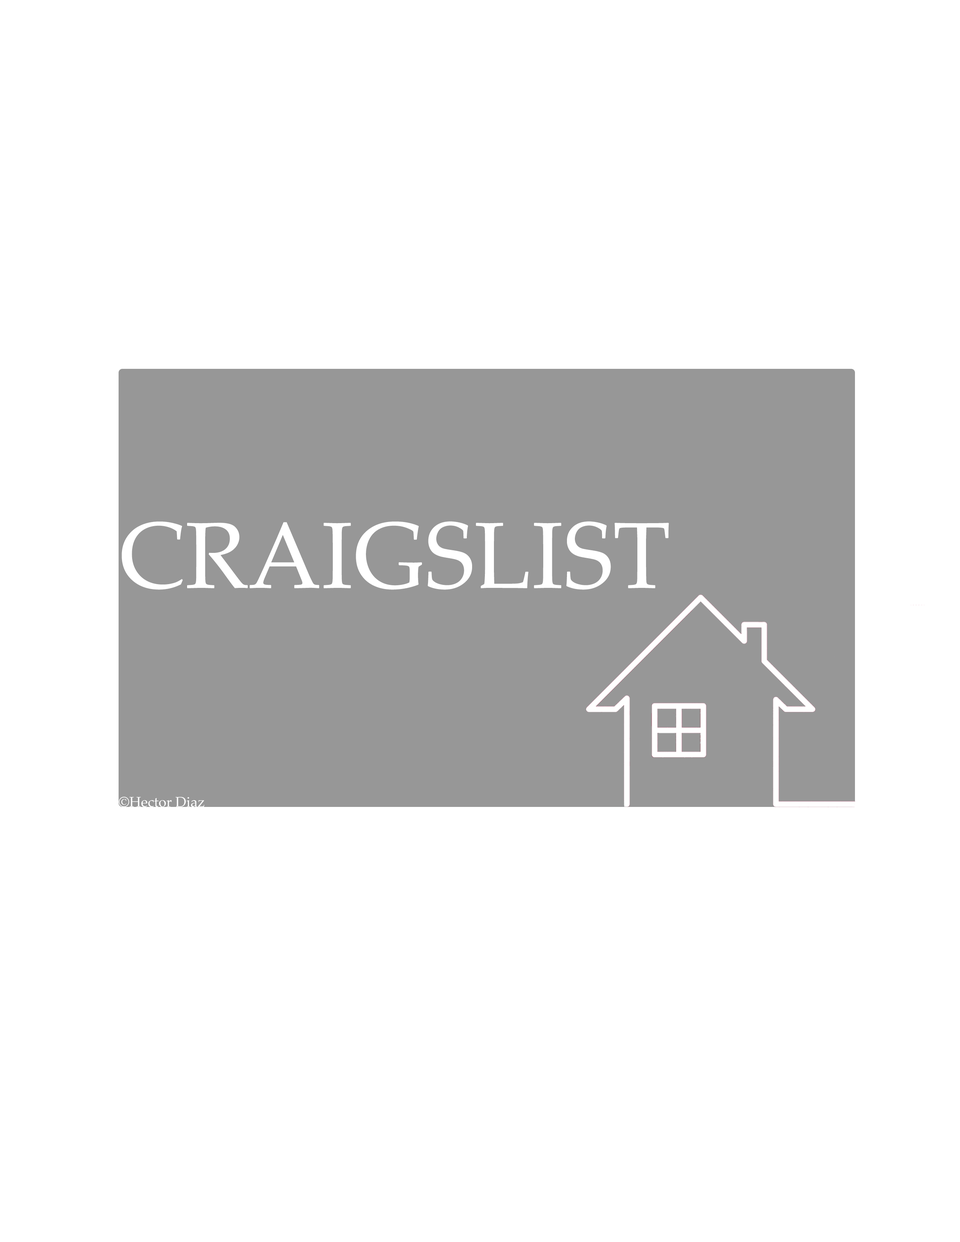
<style>
.page{position:relative;width:960px;height:1242px;background:#ffffff}
.page>*{position:absolute;margin:0}
.t1{font:94.1px "PalatinoLinotype-Roman";color:#ffffff}
.t2{font:14.1px "PalatinoLinotype-Roman";color:#ffffff}
</style>
<div class="page">
<p class="t1" style="left:122px;top:521px;width:547px;height:69px">CRAIGSLIST</p>
<p class="t2" style="left:119px;top:797px;width:85px;height:10px">©Hector Diaz</p>
</div>
